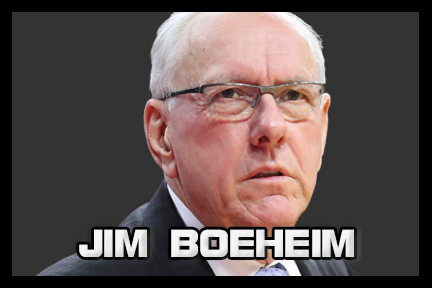
<style>
.page{position:relative;width:432px;height:288px;background:#333333}
.page>*{position:absolute;margin:0}
.t1{font:41.7px "BolsterBold";color:#f3f3f3}
</style>
<div class="page">
<p class="t1" style="left:79px;top:229px;width:275px;height:28px">JIM BOEHEIM</p>
</div>
